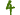
<style>
.page{position:relative;width:20px;height:15px;background:#ffffff}
.page>*{position:absolute;margin:0}
.t1{font:20.8px "Chiller-Regular";letter-spacing:0.025em;color:#457106;font-weight:bold}
</style>
<div class="page">
<p class="t1" style="left:5px;top:0px;width:10px;height:16px">4</p>
</div>
